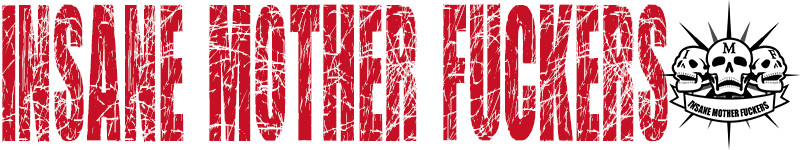
<style>
.page{position:relative;width:800px;height:150px;background:#ffffff}
.page>*{position:absolute;margin:0}
.t1{font:194.7px "ScratchedLetters";color:#c61025;scale:0.38 1}
</style>
<div class="page">
<p class="t1" style="left:2px;top:3px;width:666px;height:139px">INSANE MOTHER FUCKERS</p>
</div>
